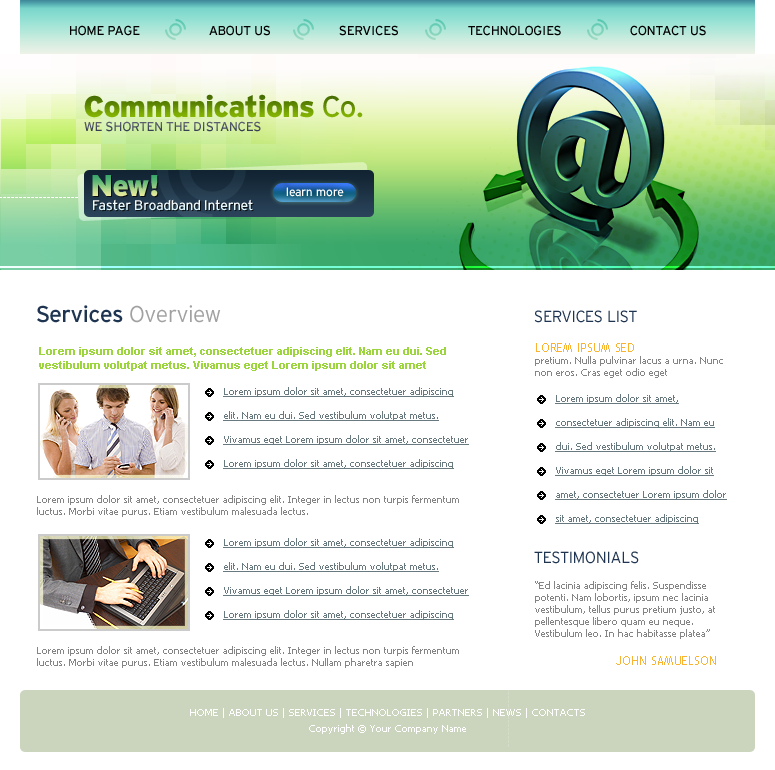
<style>
.page{position:relative;width:775px;height:770px;background:#ffffff}
.page>*{position:absolute;margin:0}
.t1{font:13px "Interstate-Regular";letter-spacing:-0.02em;color:#000000;text-transform:uppercase}
.t2{font:30px "Interstate-Black";letter-spacing:-0.02em}
.t3{font:30px "Interstate-Regular";letter-spacing:-0.02em}
.t4{font:13px "Interstate-Regular";letter-spacing:-0.02em;color:#515565;text-transform:uppercase}
.t5{font:12px "Interstate-Regular";letter-spacing:-0.02em;color:#ffffff}
.t6{font:14px "Interstate-Regular";letter-spacing:-0.02em;color:#e7f8fb}
.t7{font:23px "Interstate-Regular";letter-spacing:-0.02em;color:#1e3450}
.t8{font:23px "Interstate-Light";letter-spacing:-0.02em;color:#a1a1a1}
.t9{font:16px "Interstate-Light";letter-spacing:-0.02em;color:#1e3450;text-transform:uppercase}
.t10{font:11px/14px "Arial-BoldMT";color:#9dd53e}
.t11{font:10px/12px "Tahoma";color:#858585}
.t12{font:12px/10px "TrebuchetMS";color:#f9b331;text-transform:uppercase}
.t13{font:10px/24px "Tahoma";color:#687a7f;text-decoration:underline}
.t14{font:12px "TrebuchetMS";color:#f9b331;text-transform:uppercase}
.t15{font:10px/16px "Tahoma";color:#ffffff}
</style>
<div class="page">
<p class="t1" style="left:70px;top:25px;width:70px;height:11px">HOME PAGE</p>
<p class="t1" style="left:209px;top:25px;width:61px;height:11px">ABOUT US</p>
<p class="t1" style="left:339px;top:25px;width:59px;height:11px">SERVICES</p>
<p class="t1" style="left:468px;top:25px;width:93px;height:11px">TECHNOLOGIES</p>
<p class="t1" style="left:630px;top:25px;width:76px;height:11px">CONTACT US</p>
<p class="t2" style="left:84px;top:94px;width:279px;height:24px">Communications<span class="t3"> Co.</span></p>
<p class="t4" style="left:84px;top:121px;width:177px;height:11px">WE SHORTEN THE DISTANCES</p>
<p class="t2" style="left:92px;top:175px;width:66px;height:22px">New!</p>
<p class="t5" style="left:286px;top:187px;width:58px;height:10px">learn more</p>
<p class="t6" style="left:93px;top:199px;width:160px;height:12px">Faster Broadband Internet</p>
<p class="t7" style="left:37px;top:305px;width:184px;height:18px">Services <span class="t8">Overview</span></p>
<p class="t9" style="left:534px;top:310px;width:103px;height:13px">SERVICES LIST</p>
<p class="t10" style="left:39px;top:347px;width:407px;height:24px">Lorem ipsum dolor sit amet, consectetuer adipiscing elit. Nam eu dui. Sed vestibulum volutpat metus. Vivamus eget Lorem ipsum dolor sit amet</p>
<p class="t11" style="left:535px;top:343px;width:188px;height:35px"><span class="t12">LOREM IPSUM sed <br></span>pretium. Nulla pulvinar lacus a urna. Nunc non eros. Cras eget odio eget</p>
<p class="t13" style="left:223px;top:387px;width:246px;height:82px">Lorem ipsum dolor sit amet, consectetuer adipiscing elit. Nam eu dui. Sed vestibulum volutpat metus. Vivamus eget Lorem ipsum dolor sit amet, consectetuer Lorem ipsum dolor sit amet, consectetuer adipiscing</p>
<p class="t13" style="left:555px;top:394px;width:172px;height:130px">Lorem ipsum dolor sit amet, consectetuer adipiscing elit. Nam eu dui. Sed vestibulum volutpat metus. Vivamus eget Lorem ipsum dolor sit amet, consectetuer Lorem ipsum dolor sit amet, consectetuer adipiscing</p>
<p class="t11" style="left:37px;top:495px;width:422px;height:22px">Lorem ipsum dolor sit amet, consectetuer adipiscing elit. Integer in lectus non turpis fermentum luctus. Morbi vitae purus. Etiam vestibulum malesuada lectus.</p>
<p class="t13" style="left:223px;top:538px;width:246px;height:82px">Lorem ipsum dolor sit amet, consectetuer adipiscing elit. Nam eu dui. Sed vestibulum volutpat metus. Vivamus eget Lorem ipsum dolor sit amet, consectetuer Lorem ipsum dolor sit amet, consectetuer adipiscing</p>
<p class="t9" style="left:534px;top:551px;width:105px;height:13px">TESTIMONIALS</p>
<p class="t11" style="left:535px;top:581px;width:180px;height:58px">“Ed lacinia adipiscing felis. Suspendisse potenti. Nam lobortis, ipsum nec lacinia vestibulum, tellus purus pretium justo, at pellentesque libero quam eu neque. Vestibulum leo. In hac habitasse platea”</p>
<p class="t11" style="left:37px;top:646px;width:422px;height:22px">Lorem ipsum dolor sit amet, consectetuer adipiscing elit. Integer in lectus non turpis fermentum luctus. Morbi vitae purus. Etiam vestibulum malesuada lectus. Nullam pharetra sapien</p>
<p class="t14" style="left:616px;top:656px;width:100px;height:9px">JOHN SAMUELSON</p>
<p class="t15" style="left:190px;top:708px;width:395px;height:26px;text-align:center">HOME | ABOUT US | SERVICES | TECHNOLOGIES | PARTNERS | NEWS | CONTACTS<br>Copyright © Your Company Name</p>
</div>
